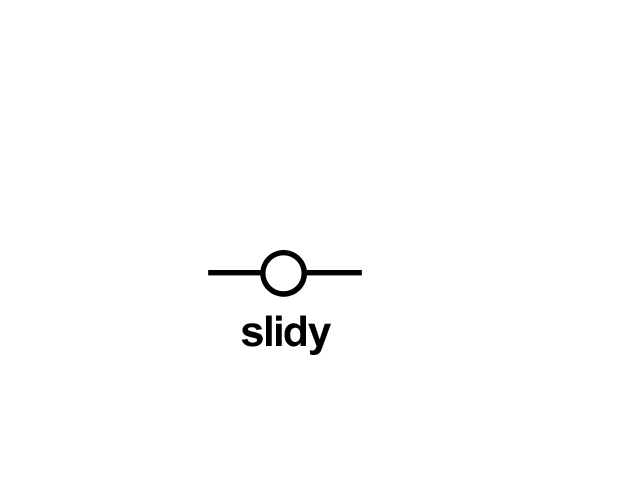
<style>
.page{position:relative;width:640px;height:480px;background:#ffffff}
.page>*{position:absolute;margin:0}
.t1{font:42.5px "Arial-BoldMT";letter-spacing:-0.025em;color:#000000}
</style>
<div class="page">
<p class="t1" style="left:241px;top:315px;width:90px;height:40px">slidy</p>
</div>
